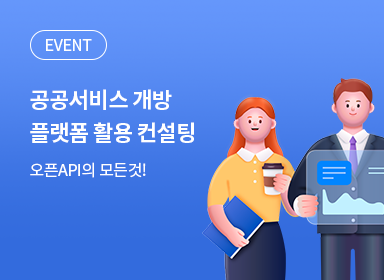
<style>
.page{position:relative;width:384px;height:280px}
.page>*{position:absolute;margin:0}
.t1{font:16px "NotoSansCJKkr-Regular";letter-spacing:-0.025em;color:#ffffff}
.t2{font:22px/33px "NotoSansCJKkr-Bold";letter-spacing:-0.025em;color:#ffffff}
</style>
<div class="page">
<p class="t1" style="left:46px;top:39px;width:46px;height:12px">EVENT</p>
<p class="t2" style="left:30px;top:89px;width:164px;height:54px">공공서비스 개방 <br>플랫폼 활용 컨설팅</p>
<p class="t1" style="left:30px;top:162px;width:116px;height:16px">오픈API의 모든것!</p>
</div>
